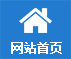
<style>
.page{position:relative;width:71px;height:59px;background:#227bcf}
.page>*{position:absolute;margin:0}
.t1{font:12px "SimSun";color:#ffffff;font-weight:bold}
</style>
<div class="page">
<p class="t1" style="left:11px;top:42px;width:51px;height:12px">网站首页</p>
</div>
